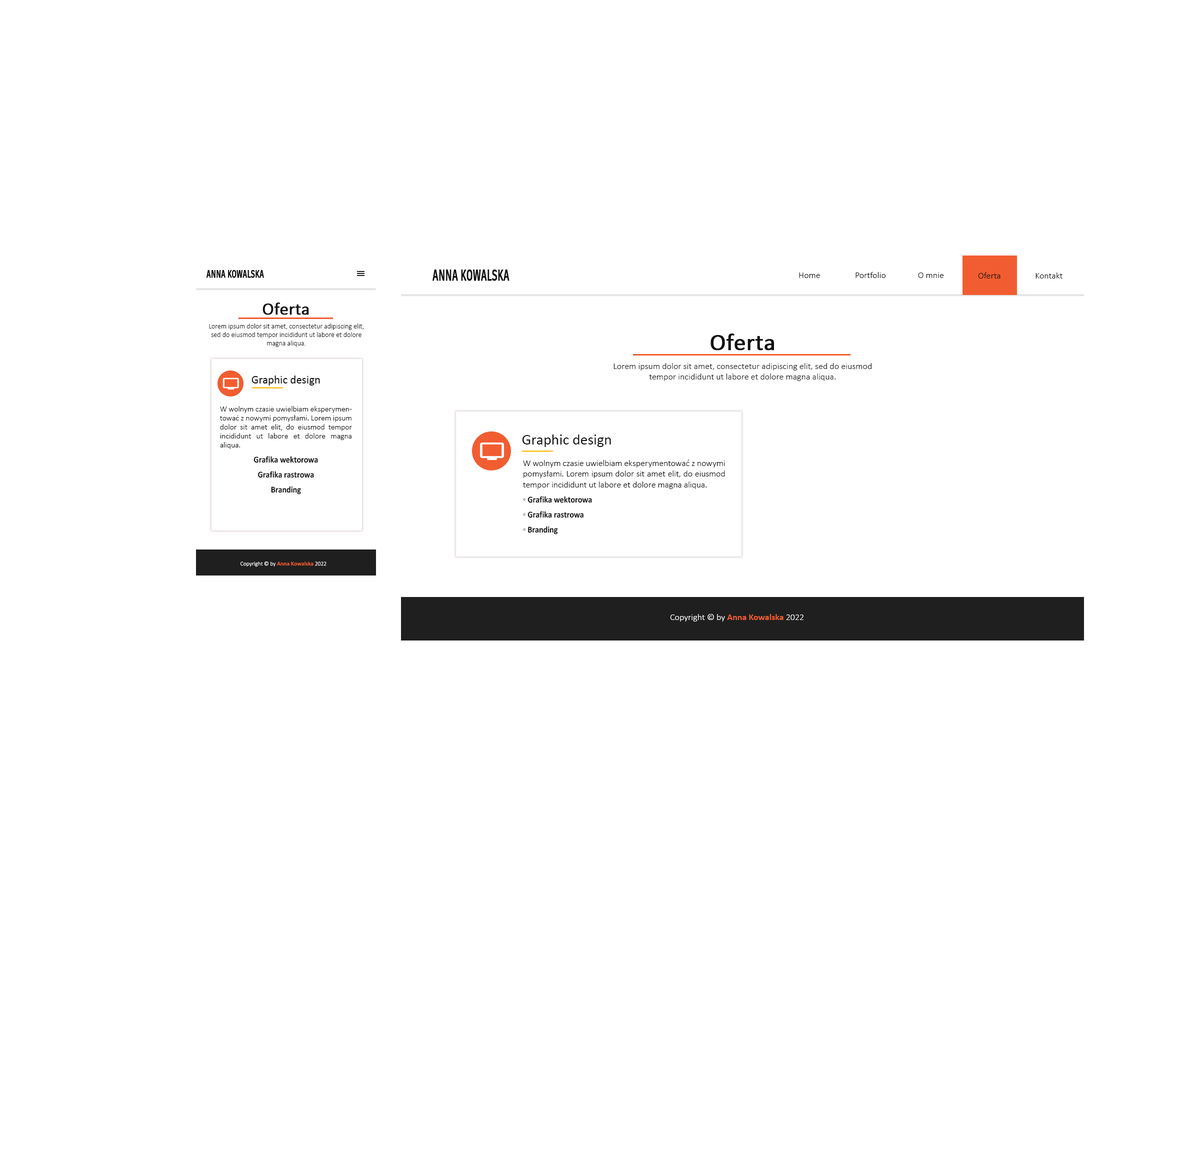
<style>
.page{position:relative;width:1195px;height:1152px;background:#ffffff}
.page>*{position:absolute;margin:0}
.t1{font:11.2px "ArtifaktElement-Bold";letter-spacing:-0.01em;color:#111111;font-weight:bold;scale:0.6 1}
.t2{font:15px "ArtifaktElement-Bold";letter-spacing:-0.01em;color:#111111;font-weight:bold;scale:0.6 1}
.t3{font:9px "Calibri-Light";color:#111111}
.t4{font:17.4px "Calibri";color:#111111;font-weight:bold}
.t5{font:7px "Calibri-Light";color:#1f1f1f}
.t6{font:24px "Calibri";color:#111111;font-weight:bold}
.t7{font:9px "Calibri-Light";color:#1f1f1f}
.t8{font:11.5px "Calibri";color:#111111}
.t9{font:8px/9px "Calibri-Light";color:#111111}
.t10{font:9px/15px "Calibri-Bold";color:#111111;scale:0.9 1}
.t11{font:15px "Calibri";color:#111111}
.t12{font:5.8px "Calibri-Light";color:#ffffff}
.t13{font:5.8px "Calibri-Bold";color:#f15d30}
.t14{font:9px "Calibri-Light";color:#ffffff}
.t15{font:9px "Calibri-Bold";color:#f15d30}
</style>
<div class="page">
<p class="t1" style="left:206px;top:270px;width:58px;height:8px">ANNA KOWALSKA</p>
<p class="t2" style="left:432px;top:270px;width:78px;height:11px">ANNA KOWALSKA</p>
<p class="t3" style="left:799px;top:272px;width:21px;height:6px">Home</p>
<p class="t3" style="left:856px;top:272px;width:30px;height:6px">Portfolio</p>
<p class="t3" style="left:918px;top:272px;width:26px;height:6px">O mnie</p>
<p class="t3" style="left:978px;top:272px;width:22px;height:6px">Oferta</p>
<p class="t3" style="left:1036px;top:272px;width:26px;height:6px">Kontakt</p>
<p class="t4" style="left:262px;top:302px;width:47px;height:13px">Oferta</p>
<p class="t5" style="left:209px;top:324px;width:155px;height:23px;text-align:center">Lorem ipsum dolor sit amet, consectetur adipiscing elit, sed do eiusmod tempor incididunt ut labore et dolore magna aliqua.</p>
<p class="t6" style="left:710px;top:334px;width:64px;height:16px">Oferta</p>
<p class="t7" style="left:614px;top:363px;width:258px;height:18px;text-align:center">Lorem ipsum dolor sit amet, consectetur adipiscing elit, sed do eiusmod tempor incididunt ut labore et dolore magna aliqua.</p>
<p class="t8" style="left:252px;top:376px;width:68px;height:10px">Graphic design</p>
<p class="t9" style="left:220px;top:406px;width:132px;height:88px;text-align:justify">W wolnym czasie uwielbiam eksperymentować z nowymi pomysłami. Lorem ipsum dolor sit amet elit, do eiusmod tempor incididunt ut labore et dolore magna aliqua.<br><span class="t10">Grafika wektorowa<br>Grafika rastrowa<br>Branding</span></p>
<p class="t11" style="left:522px;top:434px;width:89px;height:13px">Graphic design</p>
<p class="t3" style="left:523px;top:460px;width:202px;height:74px;text-align:justify">W wolnym czasie uwielbiam eksperymentować z nowymi pomysłami. Lorem ipsum dolor sit amet elit, do eiusmod tempor incididunt ut labore et dolore magna aliqua.<br><span class="t10">◦ Grafika wektorowa<br>◦ Grafika rastrowa<br>◦ Branding</span></p>
<p class="t12" style="left:240px;top:562px;width:86px;height:5px">Copyright © by <span class="t13">Anna Kowalska</span> 2022</p>
<p class="t14" style="left:670px;top:614px;width:134px;height:8px">Copyright © by <span class="t15">Anna Kowalska</span> 2022</p>
</div>
